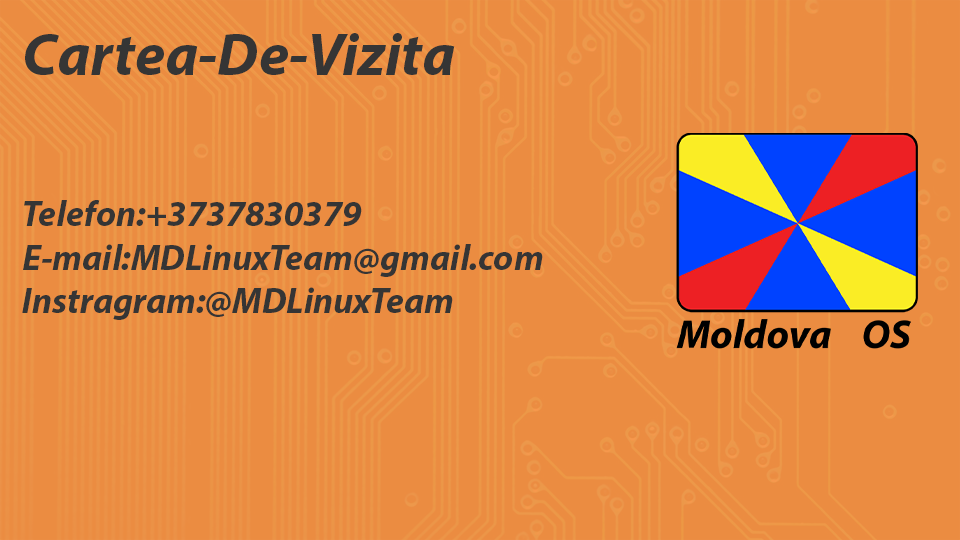
<style>
.page{position:relative;width:960px;height:540px;background:#eb8c41}
.page>*{position:absolute;margin:0}
.t1{font:60px "MyriadPro-BoldIt";color:#353535}
.t2{font:36px "MyriadPro-BoldIt";color:#353535}
</style>
<div class="page">
<p class="t1" style="left:25px;top:33px;width:430px;height:42px">Cartea-De-Vizita</p>
<p class="t2" style="left:22px;top:200px;width:521px;height:120px">Telefon:+3737830379<br>E-mail:MDLinuxTeam@gmail.com<br>Instragram:@MDLinuxTeam</p>
</div>
